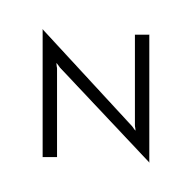
<style>
.page{position:relative;width:192px;height:192px;background:#ffffff}
.page>*{position:absolute;margin:0}
.t1{font:175px "JosefinSans-Bold";letter-spacing:0.18em;color:#000000;text-transform:uppercase}
</style>
<div class="page">
<p class="t1" style="left:42px;top:29px;width:108px;height:134px">N</p>
</div>
